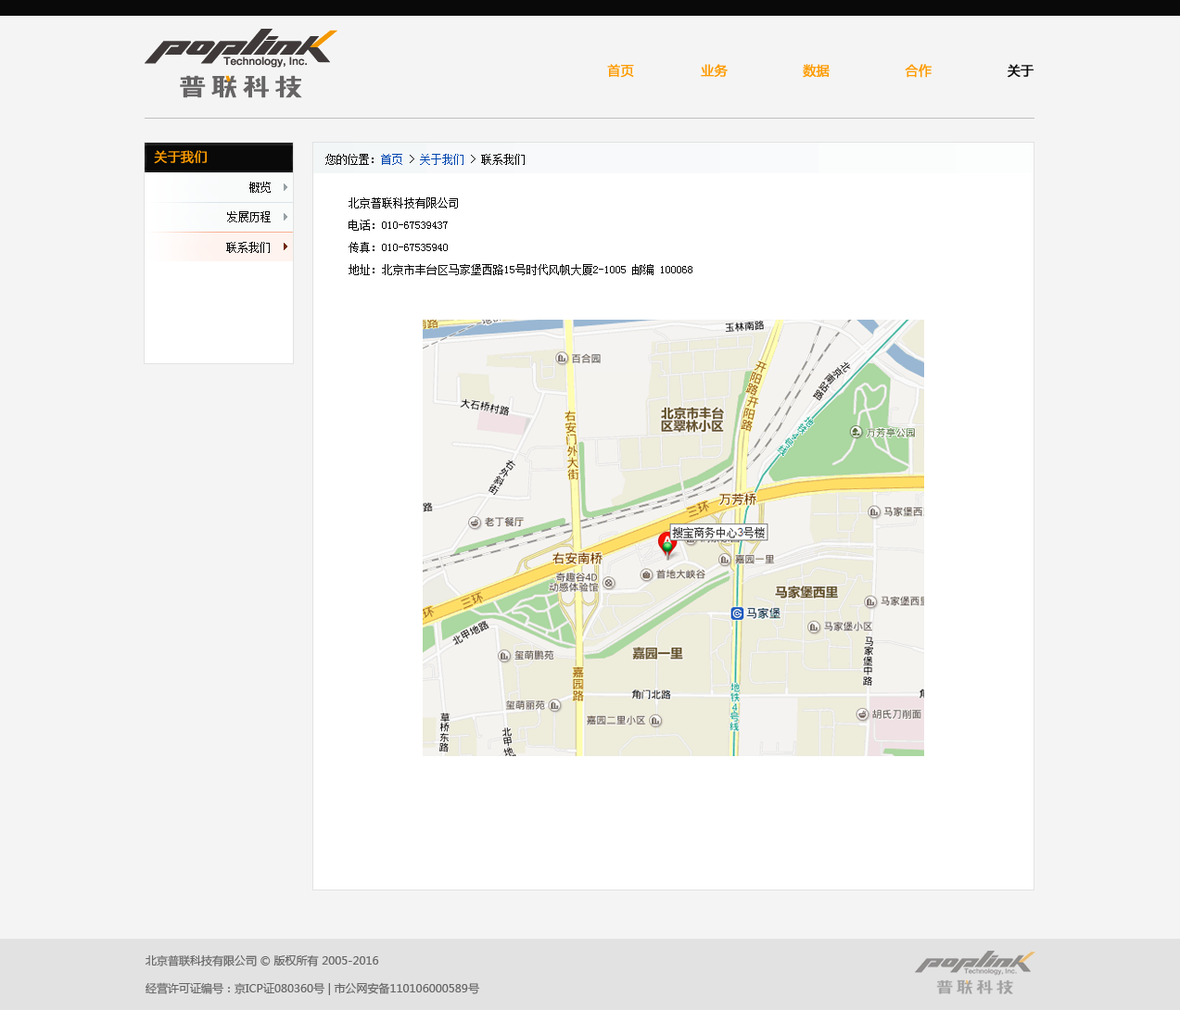
<style>
.page{position:relative;width:1180px;height:1010px;background:#f4f4f4}
.page>*{position:absolute;margin:0}
.t1{font:13px "MicrosoftYaHei";color:#fe9b00;text-transform:uppercase;font-weight:bold}
.t2{font:13px "MicrosoftYaHei";color:#090909;text-transform:uppercase;font-weight:bold}
.t3{font:13px "MicrosoftYaHei";color:#fe9b00;font-weight:bold}
.t4{font:11.1px "SimSun";color:#090909;text-transform:uppercase}
.t5{font:11.1px "SimSun";color:#0146af;text-transform:uppercase}
.t6{font:11.1px/22.2px "SimSun";color:#090909;text-transform:uppercase}
.t7{font:11.1px/27.8px "MicrosoftYaHei";color:#666666}
</style>
<div class="page">
<p class="t1" style="left:607px;top:64px;width:427px;height:14px">首页                业务                  数据                  合作                  <span class="t2">关于</span></p>
<p class="t3" style="left:154px;top:150px;width:53px;height:14px">关于我们</p>
<p class="t4" style="left:325px;top:154px;width:200px;height:11px">您的位置：<span class="t5">首页 </span>&gt; <span class="t5">关于我们 </span>&gt; 联系我们</p>
<p class="t4" style="left:249px;top:182px;width:22px;height:11px">概览</p>
<p class="t6" style="left:349px;top:197px;width:343px;height:78px">北京普联科技有限公司<br>电话：010-67539437<br>传真：010-67535940<br>地址：北京市丰台区马家堡西路15号时代风帆大厦2-1005 邮编 100068</p>
<p class="t4" style="left:227px;top:211px;width:44px;height:11px">发展历程</p>
<p class="t4" style="left:226px;top:242px;width:44px;height:11px">联系我们</p>
<p class="t7" style="left:146px;top:955px;width:334px;height:41px">北京普联科技有限公司 © 版权所有 2005-2016<br>经营许可证编号：京ICP证080360号 | 市公网安备110106000589号</p>
</div>
